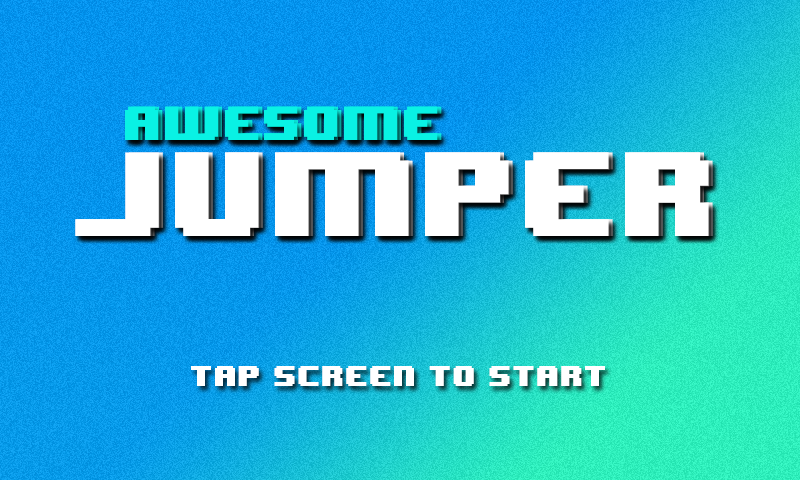
<style>
.page{position:relative;width:800px;height:480px}
.page>*{position:absolute;margin:0}
.t1{font:40px "8BITWONDERNominal";color:#09f2e4}
.t2{font:100.4px "8BITWONDERNominal";color:#ffffff}
.t3{font:99.4px "8BITWONDERNominal";color:#ffffff}
.t4{font:100.3px "8BITWONDERNominal";color:#ffffff}
.t5{font:24px "8BITWONDERNominal";color:#ffffff}
</style>
<div class="page">
<p class="t1" style="left:125px;top:106px;width:313px;height:34px">awesome</p>
<p class="t1" style="left:125px;top:106px;width:313px;height:34px">awesome</p>
<p class="t1" style="left:129px;top:106px;width:313px;height:34px">awesome</p>
<p class="t2" style="left:75px;top:152px;width:634px;height:84px">Jumper</p>
<p class="t3" style="left:76px;top:153px;width:634px;height:83px">Jumper</p>
<p class="t4" style="left:79px;top:152px;width:634px;height:84px">Jumper</p>
<p class="t5" style="left:191px;top:366px;width:414px;height:20px">tap screen to start</p>
</div>
